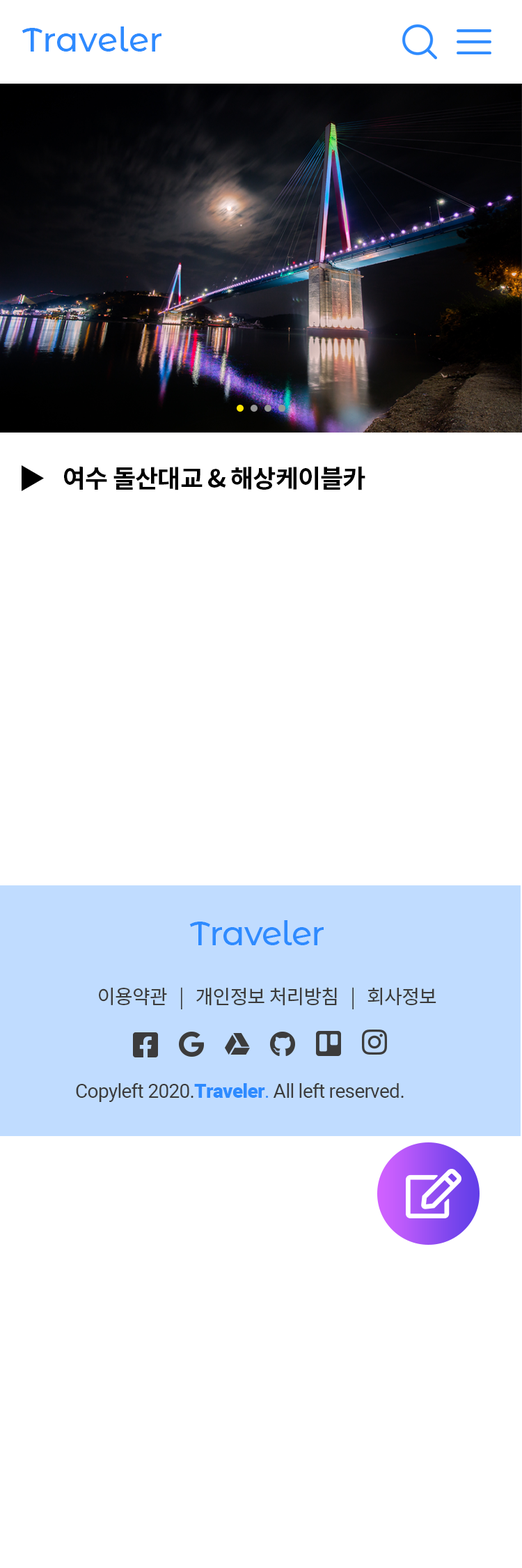
<style>
.page{position:relative;width:522px;height:1568px;background:#ffffff}
.page>*{position:absolute;margin:0}
.t1{font:33.4px "MontserratAlternates-Medium";color:#2e8bff}
.t2{font:25.1px "NotoSansKR-Bold";letter-spacing:-0.025em;color:#000000}
.t3{font:33.4px "MontserratAlternates-Medium";letter-spacing:-0.025em;color:#2e8bff}
.t4{font:19.5px "NotoSansKR-Regular";letter-spacing:-0.025em;color:#3c3c3c}
.t5{font:19.5px "Roboto-Regular";letter-spacing:-0.025em;color:#3c3c3c}
.t6{font:19.5px "Roboto-Black";letter-spacing:-0.025em;color:#2e8bff}
.t7{font:19.5px "Roboto-Regular";letter-spacing:-0.025em;color:#2e8bff}
</style>
<div class="page">
<p class="t1" style="left:22px;top:26px;width:140px;height:26px">Traveler</p>
<p class="t2" style="left:64px;top:466px;width:302px;height:24px">여수 돌산대교 &amp; 해상케이블카</p>
<p class="t3" style="left:189px;top:920px;width:135px;height:25px">Traveler</p>
<p class="t4" style="left:99px;top:987px;width:338px;height:22px">이용약관   |   개인정보 처리방침   |   회사정보</p>
<p class="t5" style="left:76px;top:1083px;width:328px;height:19px">Copyleft 2020.<span class="t6">Traveler</span><span class="t7">.</span> All left reserved.</p>
</div>
